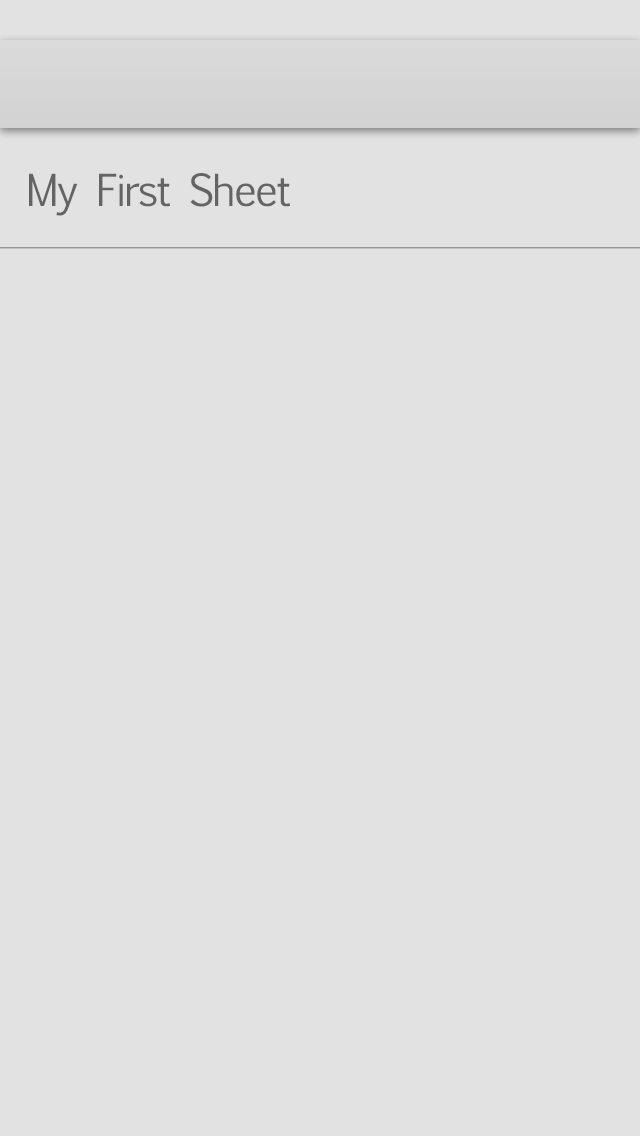
<style>
.page{position:relative;width:640px;height:1136px;background:#e2e2e2}
.page>*{position:absolute;margin:0}
.t1{font:42px "EuphemiaUCAS";letter-spacing:-0.04em;color:#646464}
</style>
<div class="page">
<p class="t1" style="left:29px;top:173px;width:261px;height:43px">My First Sheet</p>
</div>
